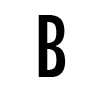
<style>
.page{position:relative;width:100px;height:100px;background:#ffffff}
.page>*{position:absolute;margin:0}
.t1{font:100px "TwCenMT-Condensed";color:#000000}
</style>
<div class="page">
<p class="t1" style="left:38px;top:15px;width:28px;height:62px">B</p>
</div>
